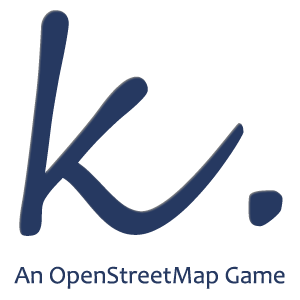
<style>
.page{position:relative;width:300px;height:300px;background:#ffffff}
.page>*{position:absolute;margin:0}
.t1{font:293px "SegoeScript";color:#263961}
.t2{font:25px "Candara";color:#263961}
</style>
<div class="page">
<p class="t1" style="left:19px;top:10px;width:264px;height:226px">k.</p>
<p class="t2" style="left:14px;top:266px;width:271px;height:23px">An OpenStreetMap Game</p>
</div>
